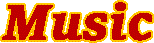
<style>
.page{position:relative;width:154px;height:43px;background:#bb0000}
.page>*{position:absolute;margin:0}
.t1{font:52.9px "SitkaText-BoldItalic";color:#c00007;font-weight:bold;scale:0.93 1}
</style>
<div class="page">
<p class="t1" style="left:2px;top:2px;width:150px;height:39px">Music</p>
</div>
